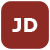
<style>
.page{position:relative;width:50px;height:50px;background:#8c2a23}
.page>*{position:absolute;margin:0}
.t1{font:19px "Verdana-Bold";color:#ffffff}
</style>
<div class="page">
<p class="t1" style="left:12px;top:18px;width:26px;height:14px">JD</p>
</div>
